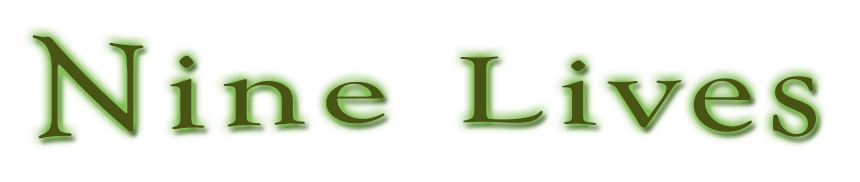
<style>
.page{position:relative;width:860px;height:182px;background:#ffffff}
.page>*{position:absolute;margin:0}
.t1{font:152.9px "GoudyOldStyleT-Regular";letter-spacing:0.08em;color:#475413;scale:1.05 1}
</style>
<div class="page">
<p class="t1" style="left:32px;top:35px;width:784px;height:104px">Nine Lives</p>
</div>
